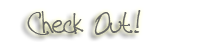
<style>
.page{position:relative;width:216px;height:50px;background:#ffffff}
.page>*{position:absolute;margin:0}
.t1{font:36px "TallPaul";color:#666666}
</style>
<div class="page">
<p class="t1" style="left:27px;top:10px;width:114px;height:25px">Check Out!</p>
</div>
